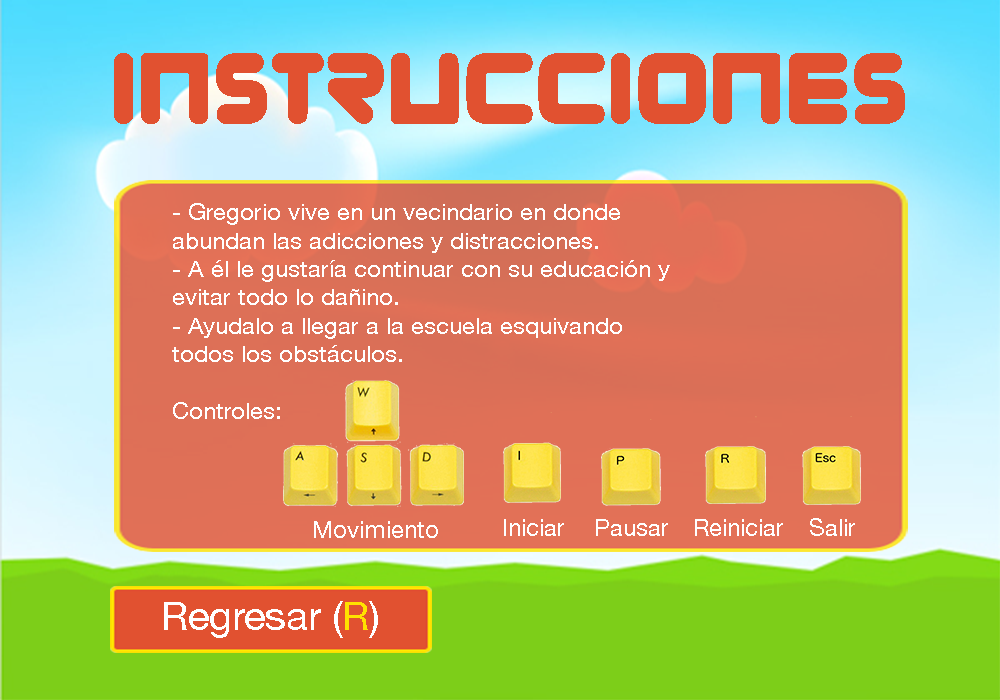
<style>
.page{position:relative;width:1000px;height:700px}
.page>*{position:absolute;margin:0}
.t1{font:100px "Zorque-Regular";color:#e15130}
.t2{font:22.7px/28.3px "HelveticaNeue";color:#ffffff;scale:1.06 1}
.t3{font:24px "HelveticaNeue";color:#ffffff}
.t4{font:23.9px "HelveticaNeue";color:#ffffff}
.t5{font:40px "HelveticaNeue";color:#ffffff}
.t6{font:40px "HelveticaNeue";color:#ffe100}
</style>
<div class="page">
<p class="t1" style="left:114px;top:53px;width:791px;height:71px">INSTRUCCIONES</p>
<p class="t2" style="left:172px;top:203px;width:498px;height:216px">- Gregorio vive en un vecindario en donde <br>abundan las adicciones y distracciones.<br>- A él le gustaría continuar con su educación y<br>evitar todo lo dañino.<br>- Ayudalo a llegar a la escuela esquivando<br>todos los obstáculos.<br><br>Controles:</p>
<p class="t3" style="left:314px;top:521px;width:124px;height:17px">Movimiento</p>
<p class="t3" style="left:504px;top:519px;width:60px;height:17px">Iniciar</p>
<p class="t4" style="left:596px;top:519px;width:72px;height:17px">Pausar</p>
<p class="t3" style="left:695px;top:519px;width:88px;height:17px">Reiniciar</p>
<p class="t3" style="left:810px;top:518px;width:45px;height:18px">Salir</p>
<p class="t5" style="left:164px;top:601px;width:214px;height:37px">Regresar (<span class="t6">R</span>)</p>
</div>
